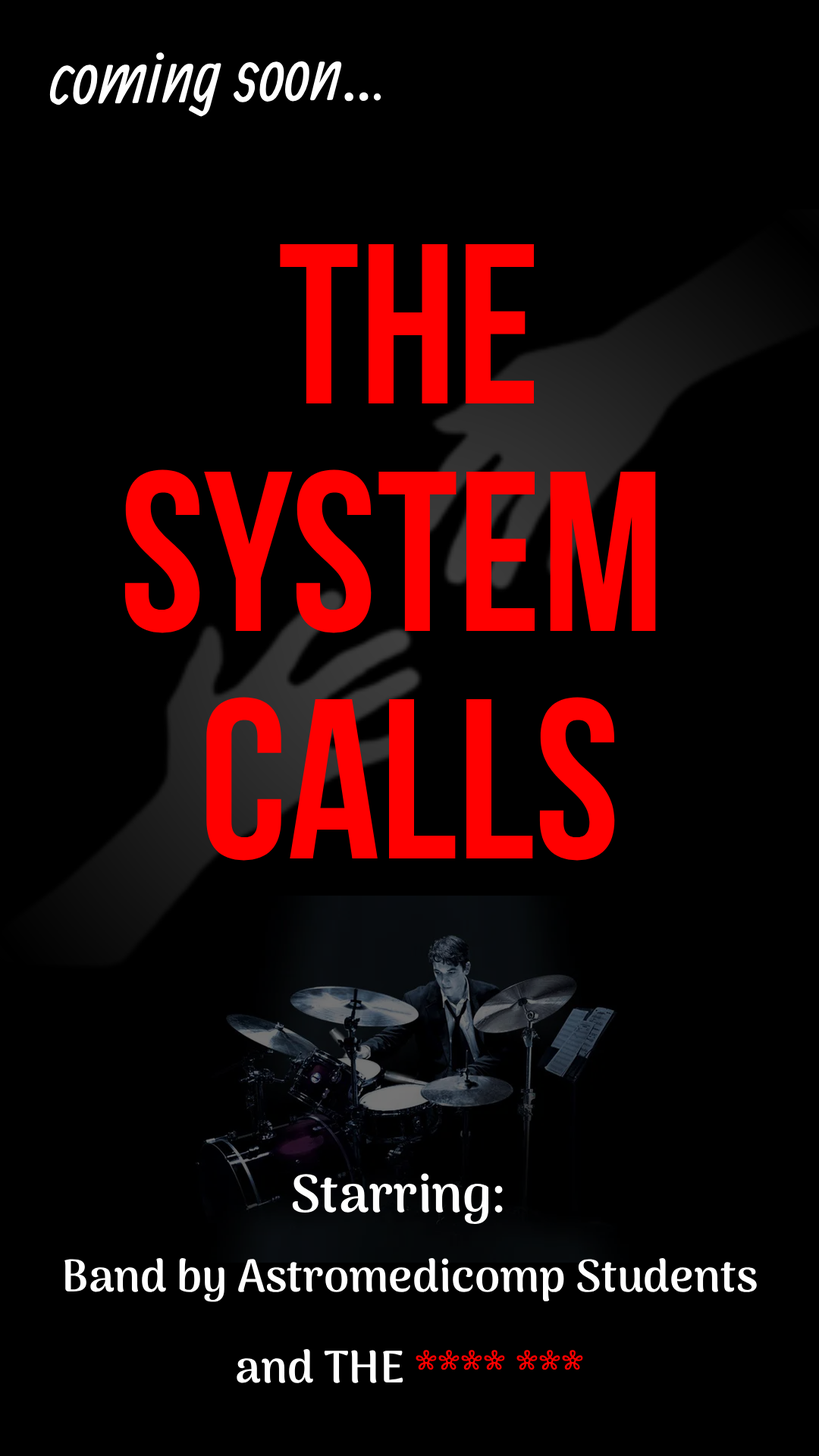
<style>
.page{position:relative;width:819px;height:1456px;background:#000000}
.page>*{position:absolute;margin:0}
.t1{font:75.8px "Allan-Regular";color:#ffffff}
.t2{font:60.7px "Allan-Regular";color:#ffffff}
.t3{font:227.5px/227.5px "BebasNeueBold";color:#ff0000}
.t4{font:53.1px "ArimaMadurai-Bold";color:#ffffff}
.t5{font:45.5px/91px "ArimaMadurai-Bold";color:#ffffff}
.t6{font:45.5px/91px "ArimaMadurai-Bold";color:#ff0000}
</style>
<div class="page">
<p class="t1" style="left:49px;top:52px;width:332px;height:65px;rotate:-1deg">coming soon..<span class="t2">.</span></p>
<p class="t3" style="left:124px;top:244px;width:532px;height:617px;text-align:center">The<br>SYSTEM <br>CALLS</p>
<p class="t4" style="left:292px;top:1173px;width:211px;height:51px">Starring:</p>
<p class="t5" style="left:64px;top:1258px;width:693px;height:125px;text-align:center">Band by Astromedicomp Students<br>and THE <span class="t6">**** ***</span></p>
</div>
